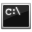
<style>
.page{position:relative;width:32px;height:32px;background:#111111}
.page>*{position:absolute;margin:0}
.t1{font:11px "CourierNewPS-BoldMT";letter-spacing:-0.125em;color:#cdcdcd}
.t2{font:11px "CourierNewPS-BoldMT";letter-spacing:-0.2em;color:#cdcdcd}
.t3{font:10px "CourierNewPS-BoldMT";letter-spacing:-0.1em;color:#cdcdcd}
</style>
<div class="page">
<p class="t1" style="left:5px;top:7px;width:16px;height:8px">C<span class="t2">:</span><span class="t3">\</span></p>
</div>
